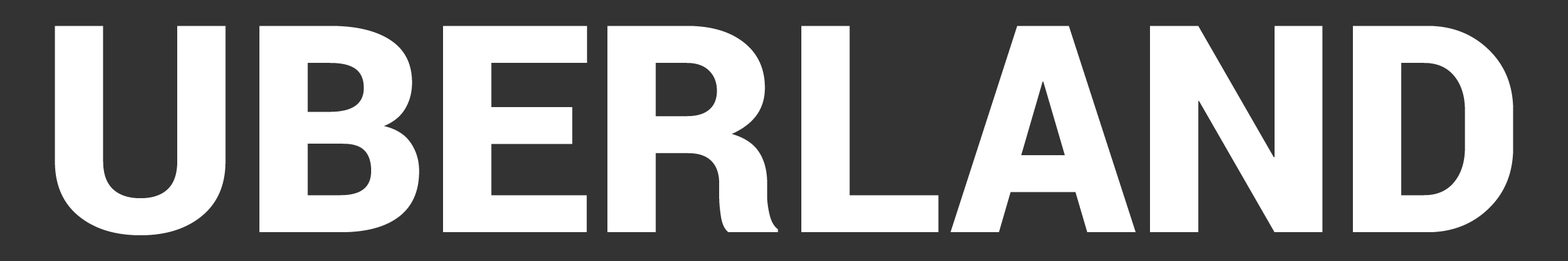
<style>
.page{position:relative;width:1568px;height:261px;background:#333333}
.page>*{position:absolute;margin:0}
.t1{font:290.4px "Roboto-Black";color:#ffffff}
</style>
<div class="page">
<p class="t1" style="left:55px;top:26px;width:1458px;height:210px">UBERLAND</p>
</div>
